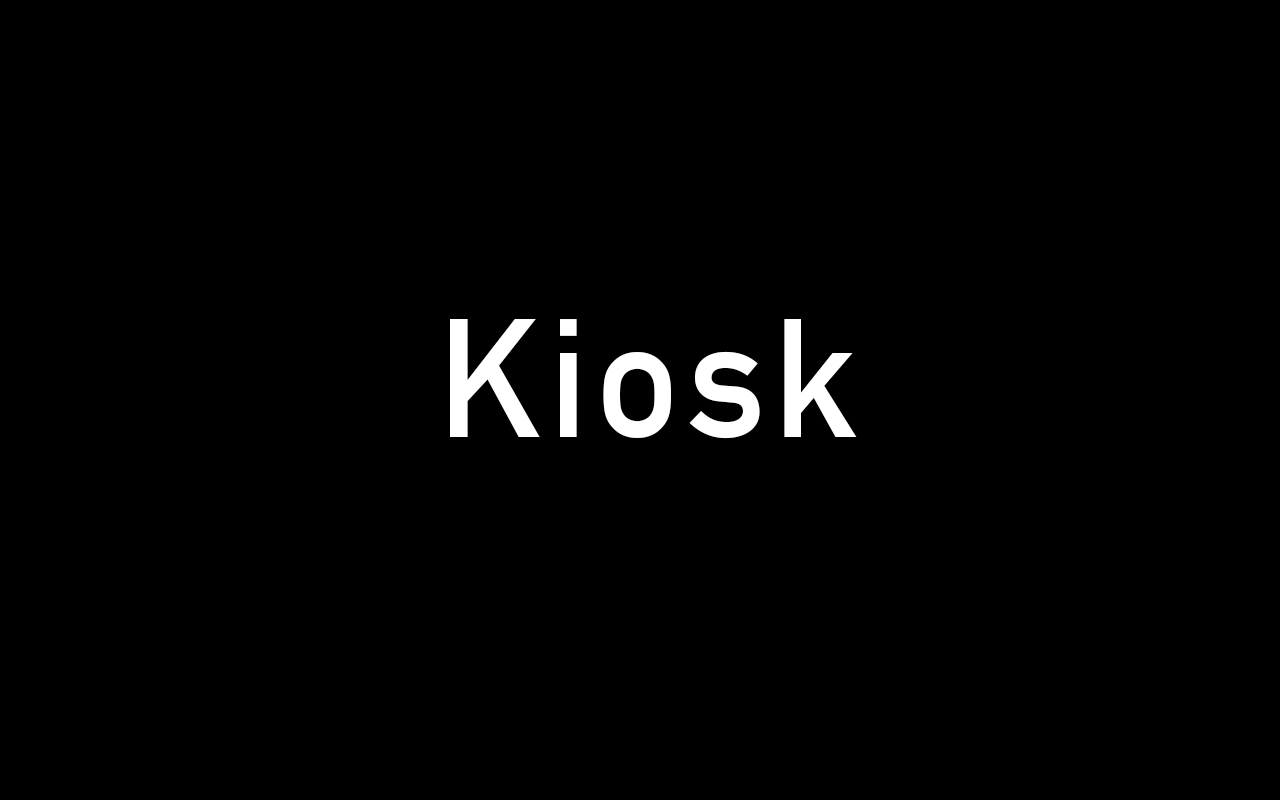
<style>
.page{position:relative;width:1280px;height:800px;background:#000000}
.page>*{position:absolute;margin:0}
.t1{font:165.4px "DINMittelschrift";letter-spacing:0.06em;color:#ffffff}
</style>
<div class="page">
<p class="t1" style="left:450px;top:319px;width:407px;height:120px">Kiosk</p>
</div>
